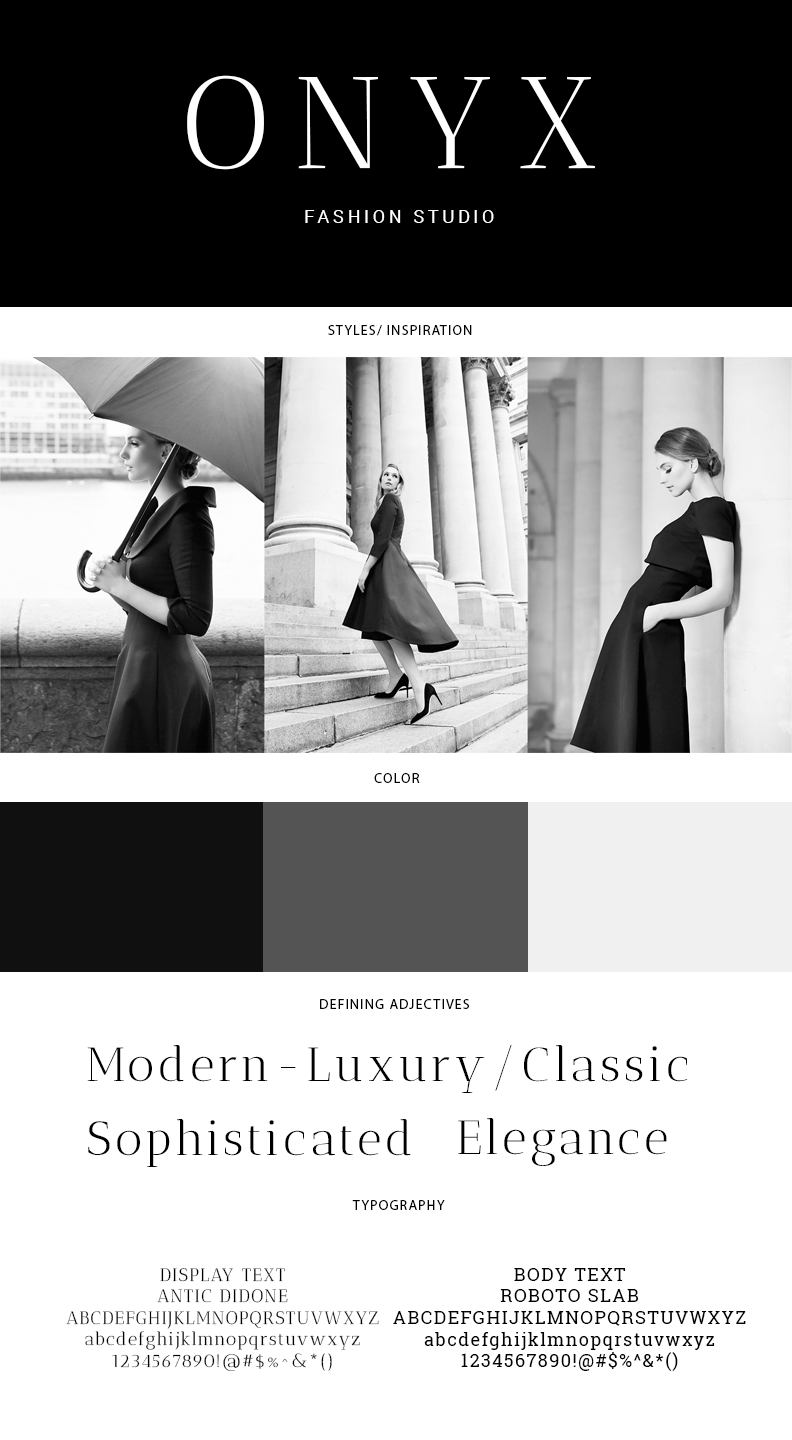
<style>
.page{position:relative;width:792px;height:1440px;background:#ffffff}
.page>*{position:absolute;margin:0}
.t1{font:130px "AnticDidone-Regular";letter-spacing:0.2em;color:#ffffff}
.t2{font:18px "Roboto-Regular";letter-spacing:0.2em;color:#ffffff}
.t3{font:14px "Gulim";letter-spacing:0.08em;color:#000000}
.t4{font:48px "AnticDidone-Regular";letter-spacing:0.08em;color:#000000}
.t5{font:18px "AnticDidone-Regular";letter-spacing:0.08em;color:#000000}
.t6{font:18px "RobotoSlab-Regular";letter-spacing:0.08em;color:#000000}
</style>
<div class="page">
<p class="t1" style="left:187px;top:75px;width:408px;height:95px">ONYX</p>
<p class="t2" style="left:305px;top:210px;width:189px;height:13px">FASHION STUDIO</p>
<p class="t3" style="left:328px;top:325px;width:144px;height:11px">STYLES/ INSPIRATION</p>
<p class="t3" style="left:374px;top:773px;width:46px;height:10px">COLOR</p>
<p class="t3" style="left:320px;top:999px;width:149px;height:10px">DEFINING ADJECTIVES</p>
<p class="t4" style="left:87px;top:1045px;width:601px;height:48px">Modern-Luxury/Classic</p>
<p class="t4" style="left:88px;top:1119px;width:323px;height:48px">Sophisticated</p>
<p class="t4" style="left:458px;top:1118px;width:209px;height:48px">Elegance</p>
<p class="t3" style="left:352px;top:1200px;width:93px;height:10px">TYPOGRAPHY</p>
<p class="t5" style="left:66px;top:1268px;width:313px;height:103px;text-align:center">DISPLAY TEXT<br>ANTIC DIDONE<br>ABCDEFGHIJKLMNOPQRSTUVWXYZ<br>abcdefghijklmnopqrstuvwxyz<br>1234567890!@#$%^&amp;*()</p>
<p class="t6" style="left:393px;top:1268px;width:353px;height:103px;text-align:center">BODY TEXT<br>ROBOTO SLAB<br>ABCDEFGHIJKLMNOPQRSTUVWXYZ<br>abcdefghijklmnopqrstuvwxyz<br>1234567890!@#$%^&amp;*()</p>
</div>
